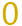
<style>
.page{position:relative;width:22px;height:26px;background:#ffffff}
.page>*{position:absolute;margin:0}
.t1{font:30px "MicrosoftYaHeiUI";color:#d4aa00}
</style>
<div class="page">
<p class="t1" style="left:2px;top:2px;width:16px;height:23px">0</p>
</div>
